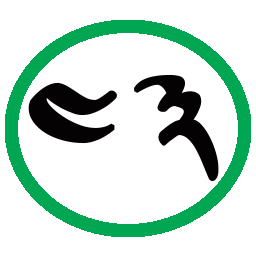
<style>
.page{position:relative;width:256px;height:256px;background:#ffffff}
.page>*{position:absolute;margin:0}
.t1{font:150px "MonlamUniOuChan2";color:#040202;font-weight:bold}
</style>
<div class="page">
<p class="t1" style="left:28px;top:74px;width:191px;height:108px">༤༣</p>
</div>
